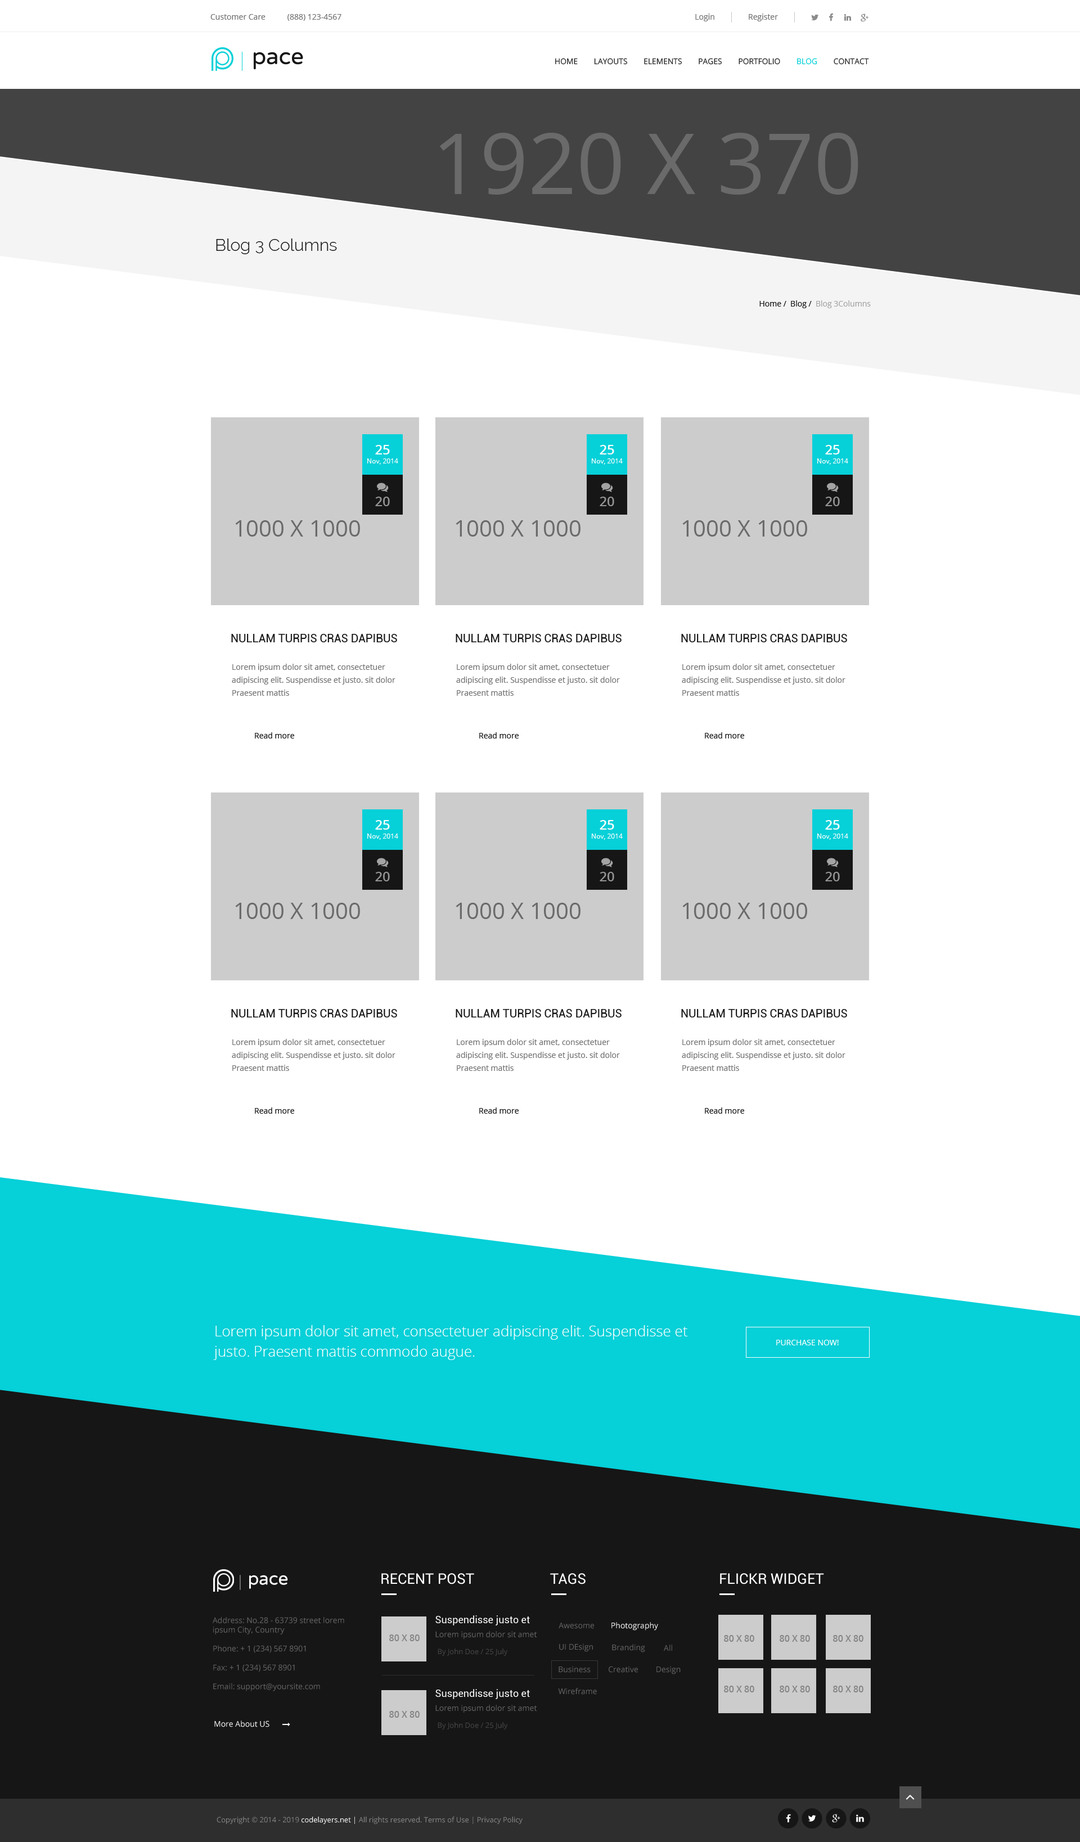
<style>
.page{position:relative;width:1080px;height:1842px;background:#ffffff}
.page>*{position:absolute;margin:0}
.t1{font:7.9px "OpenSans";color:#727272}
.t2{font:22.5px "VarelaRound-Regular";color:#161616}
.t3{font:7.9px "OpenSans";color:#272727;text-transform:uppercase}
.t4{font:7.9px "OpenSans";color:#06d0d8;text-transform:uppercase}
.t5{font:84.4px "OpenSans";color:#6a6a6a;text-transform:uppercase}
.t6{font:16.9px "Raleway-Light";color:#161616}
.t7{font:7.9px "OpenSans";color:#161616}
.t8{font:7.9px "OpenSans";color:#a4a4a4}
.t9{font:13.5px "OpenSans-Semibold";color:#ffffff;text-transform:uppercase}
.t10{font:6.8px "OpenSans";color:#ffffff}
.t11{font:13.5px "OpenSans-Semibold";color:#949393;text-transform:uppercase}
.t12{font:22.5px "OpenSans";color:#6a6a6a;text-transform:uppercase}
.t13{font:11.2px "Roboto-Regular";color:#161616;text-transform:uppercase}
.t14{font:7.9px/12.9px "OpenSans";color:#727272}
.t15{font:14.6px/20.2px "OpenSans-Light";color:#ffffff}
.t16{font:7.9px "OpenSans";color:#ffffff;text-transform:uppercase}
.t17{font:17.6px "VarelaRound-Regular";color:#ffffff}
.t18{font:14.6px "Roboto-Regular";color:#ffffff;text-transform:uppercase}
.t19{font:7.9px "OpenSans";color:#666666}
.t20{font:10.1px "Roboto-Regular";color:#ffffff}
.t21{font:7.9px "OpenSans";color:#ffffff}
.t22{font:9px "OpenSans-Semibold";color:#858585;text-transform:uppercase}
.t23{font:7.3px "OpenSans";color:#494747}
.t24{font:7.3px "OpenSans-Regular";color:#858585}
.t25{font:7.3px "OpenSans-Regular";color:#ffffff}
</style>
<div class="page">
<p class="t1" style="left:210px;top:14px;width:56px;height:6px">Customer Care</p>
<p class="t1" style="left:287px;top:14px;width:54px;height:7px">(888) 123-4567</p>
<p class="t1" style="left:695px;top:14px;width:19px;height:7px">Login</p>
<p class="t1" style="left:749px;top:14px;width:29px;height:7px">Register</p>
<p class="t2" style="left:254px;top:52px;width:49px;height:18px">pace</p>
<p class="t3" style="left:555px;top:58px;width:314px;height:7px">Home        layouts        elements        pages        portfolio        <span class="t4">blog</span>        contact</p>
<p class="t5" style="left:439px;top:133px;width:419px;height:62px">1920 x 370</p>
<p class="t6" style="left:216px;top:238px;width:121px;height:16px">Blog 3 Columns</p>
<p class="t7" style="left:759px;top:300px;width:112px;height:8px">Home /  Blog /  <span class="t8">Blog 3Columns</span></p>
<p class="t9" style="left:375px;top:445px;width:15px;height:9px">25</p>
<p class="t9" style="left:600px;top:445px;width:14px;height:9px">25</p>
<p class="t9" style="left:825px;top:445px;width:15px;height:9px">25</p>
<p class="t10" style="left:367px;top:458px;width:31px;height:7px">Nov, 2014</p>
<p class="t10" style="left:592px;top:458px;width:31px;height:7px">Nov, 2014</p>
<p class="t10" style="left:817px;top:458px;width:31px;height:7px">Nov, 2014</p>
<p class="t11" style="left:375px;top:497px;width:15px;height:9px">20</p>
<p class="t11" style="left:600px;top:497px;width:14px;height:9px">20</p>
<p class="t11" style="left:825px;top:497px;width:15px;height:9px">20</p>
<p class="t12" style="left:235px;top:520px;width:125px;height:17px">1000 x 1000</p>
<p class="t12" style="left:456px;top:520px;width:124px;height:17px">1000 x 1000</p>
<p class="t12" style="left:682px;top:520px;width:125px;height:17px">1000 x 1000</p>
<p class="t13" style="left:231px;top:634px;width:166px;height:8px">Nullam turpis Cras dapibus</p>
<p class="t13" style="left:456px;top:634px;width:166px;height:8px">Nullam turpis Cras dapibus</p>
<p class="t13" style="left:681px;top:634px;width:166px;height:8px">Nullam turpis Cras dapibus</p>
<p class="t14" style="left:232px;top:664px;width:163px;height:32px">Lorem ipsum dolor sit amet, consectetuer adipiscing elit. Suspendisse et justo. sit dolor Praesent mattis</p>
<p class="t14" style="left:456px;top:664px;width:164px;height:32px">Lorem ipsum dolor sit amet, consectetuer adipiscing elit. Suspendisse et justo. sit dolor Praesent mattis</p>
<p class="t14" style="left:682px;top:664px;width:163px;height:32px">Lorem ipsum dolor sit amet, consectetuer adipiscing elit. Suspendisse et justo. sit dolor Praesent mattis</p>
<p class="t7" style="left:255px;top:732px;width:39px;height:7px">Read more</p>
<p class="t7" style="left:479px;top:732px;width:40px;height:7px">Read more</p>
<p class="t7" style="left:705px;top:732px;width:39px;height:7px">Read more</p>
<p class="t9" style="left:375px;top:820px;width:15px;height:10px">25</p>
<p class="t9" style="left:600px;top:820px;width:14px;height:10px">25</p>
<p class="t9" style="left:825px;top:820px;width:15px;height:10px">25</p>
<p class="t10" style="left:367px;top:834px;width:31px;height:6px">Nov, 2014</p>
<p class="t10" style="left:592px;top:834px;width:31px;height:6px">Nov, 2014</p>
<p class="t10" style="left:817px;top:834px;width:31px;height:6px">Nov, 2014</p>
<p class="t11" style="left:375px;top:872px;width:15px;height:9px">20</p>
<p class="t11" style="left:600px;top:872px;width:14px;height:9px">20</p>
<p class="t11" style="left:825px;top:872px;width:15px;height:9px">20</p>
<p class="t12" style="left:235px;top:903px;width:125px;height:16px">1000 x 1000</p>
<p class="t12" style="left:456px;top:903px;width:124px;height:16px">1000 x 1000</p>
<p class="t12" style="left:682px;top:903px;width:125px;height:16px">1000 x 1000</p>
<p class="t13" style="left:231px;top:1009px;width:166px;height:9px">Nullam turpis Cras dapibus</p>
<p class="t13" style="left:456px;top:1009px;width:166px;height:9px">Nullam turpis Cras dapibus</p>
<p class="t13" style="left:681px;top:1009px;width:166px;height:9px">Nullam turpis Cras dapibus</p>
<p class="t14" style="left:232px;top:1039px;width:163px;height:32px">Lorem ipsum dolor sit amet, consectetuer adipiscing elit. Suspendisse et justo. sit dolor Praesent mattis</p>
<p class="t14" style="left:456px;top:1039px;width:164px;height:32px">Lorem ipsum dolor sit amet, consectetuer adipiscing elit. Suspendisse et justo. sit dolor Praesent mattis</p>
<p class="t14" style="left:682px;top:1039px;width:163px;height:32px">Lorem ipsum dolor sit amet, consectetuer adipiscing elit. Suspendisse et justo. sit dolor Praesent mattis</p>
<p class="t7" style="left:255px;top:1108px;width:39px;height:6px">Read more</p>
<p class="t7" style="left:479px;top:1108px;width:40px;height:6px">Read more</p>
<p class="t7" style="left:705px;top:1108px;width:39px;height:6px">Read more</p>
<p class="t15" style="left:213px;top:1325px;width:475px;height:35px">Lorem ipsum dolor sit amet, consectetuer adipiscing elit. Suspendisse et justo. Praesent mattis commodo augue.</p>
<p class="t16" style="left:776px;top:1340px;width:63px;height:6px">Purchase now!</p>
<p class="t17" style="left:249px;top:1575px;width:39px;height:14px">pace</p>
<p class="t18" style="left:381px;top:1573px;width:93px;height:12px">Recent Post</p>
<p class="t18" style="left:550px;top:1573px;width:36px;height:12px">Tags</p>
<p class="t18" style="left:720px;top:1573px;width:104px;height:12px">Flickr Widget</p>
<p class="t19" style="left:213px;top:1617px;width:131px;height:74px">Address: No.28 - 63739 street lorem ipsum City, Country<br><br>Phone: + 1 (234) 567 8901<br><br>Fax: + 1 (234) 567 8901<br><br>Email: support@yoursite.com</p>
<p class="t20" style="left:435px;top:1616px;width:95px;height:10px">Suspendisse justo et</p>
<p class="t19" style="left:559px;top:1623px;width:35px;height:6px">Awesome</p>
<p class="t21" style="left:611px;top:1622px;width:47px;height:9px">Photography</p>
<p class="t22" style="left:389px;top:1635px;width:31px;height:6px">80 x 80</p>
<p class="t19" style="left:435px;top:1631px;width:102px;height:8px">Lorem ipsum dolor sit amet</p>
<p class="t22" style="left:724px;top:1635px;width:30px;height:7px">80 x 80</p>
<p class="t22" style="left:780px;top:1635px;width:30px;height:7px">80 x 80</p>
<p class="t22" style="left:833px;top:1635px;width:30px;height:7px">80 x 80</p>
<p class="t23" style="left:438px;top:1649px;width:70px;height:7px">By John Doe / 25 July</p>
<p class="t19" style="left:559px;top:1644px;width:34px;height:8px">UI DEsign</p>
<p class="t19" style="left:612px;top:1644px;width:33px;height:9px">Branding</p>
<p class="t19" style="left:664px;top:1645px;width:8px;height:6px">All</p>
<p class="t19" style="left:559px;top:1666px;width:32px;height:7px">Business</p>
<p class="t19" style="left:609px;top:1666px;width:29px;height:7px">Creative</p>
<p class="t19" style="left:656px;top:1666px;width:25px;height:9px">Design</p>
<p class="t22" style="left:724px;top:1686px;width:30px;height:7px">80 x 80</p>
<p class="t22" style="left:780px;top:1686px;width:30px;height:7px">80 x 80</p>
<p class="t22" style="left:833px;top:1686px;width:30px;height:7px">80 x 80</p>
<p class="t20" style="left:435px;top:1689px;width:95px;height:10px">Suspendisse justo et</p>
<p class="t19" style="left:558px;top:1688px;width:39px;height:7px">Wireframe</p>
<p class="t19" style="left:435px;top:1705px;width:102px;height:8px">Lorem ipsum dolor sit amet</p>
<p class="t21" style="left:214px;top:1721px;width:55px;height:6px">More About US</p>
<p class="t22" style="left:389px;top:1711px;width:31px;height:7px">80 x 80</p>
<p class="t23" style="left:438px;top:1722px;width:70px;height:8px">By John Doe / 25 July</p>
<p class="t24" style="left:217px;top:1817px;width:306px;height:7px">Copyright © 2014 - 2019 <span class="t25">codelayers.net |</span> All rights reserved. Terms of Use | Privacy Policy</p>
</div>
